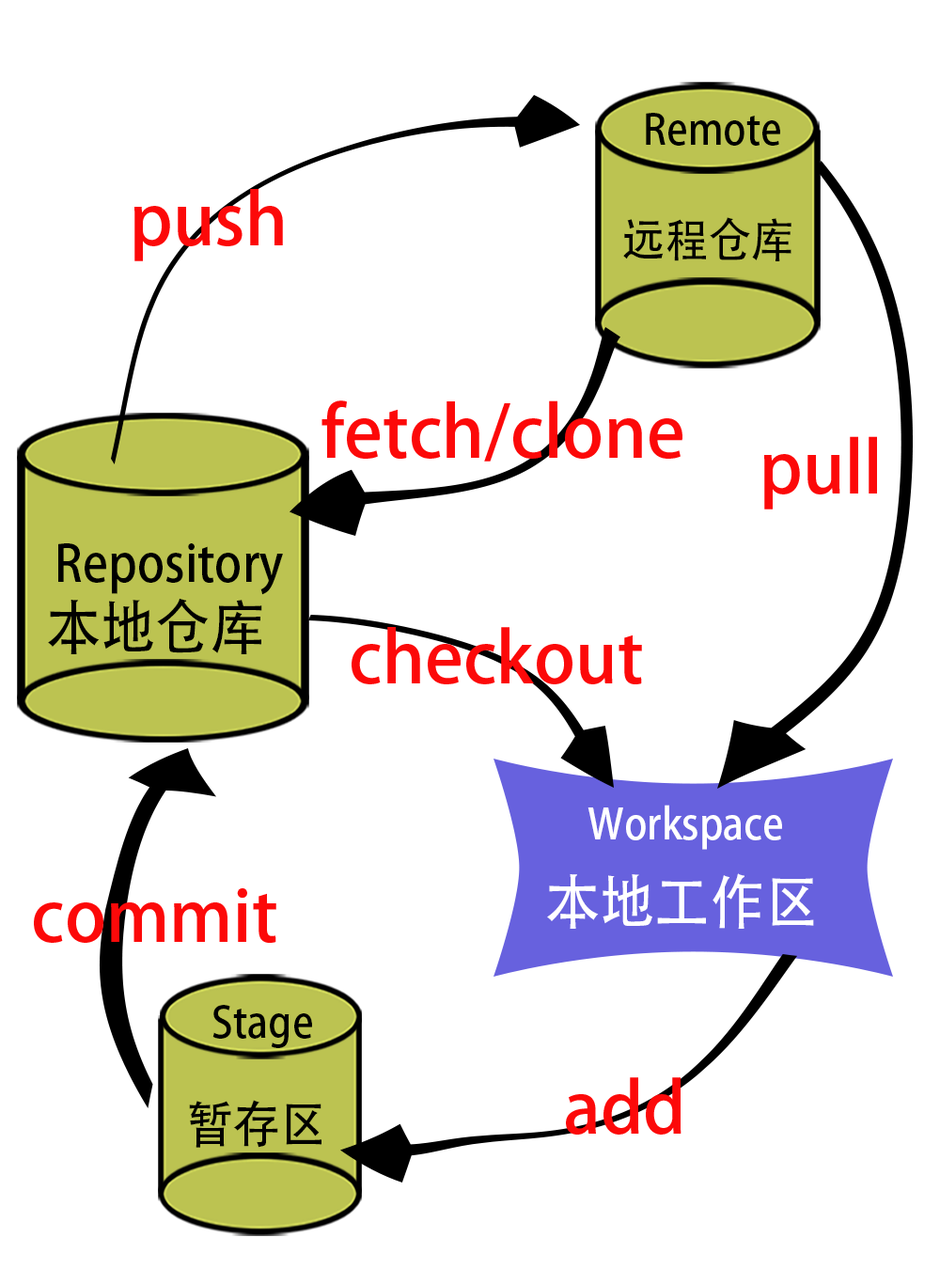
<style>
.page{position:relative;width:940px;height:1269px;background:#ffffff}
.page>*{position:absolute;margin:0}
.t1{font:42.3px "AdobeHeitiStd-Regular";color:#000000;scale:0.93 1}
.t2{font:70.5px "AdobeHeitiStd-Regular";color:#fc0909}
.t3{font:46.5px "AdobeHeitiStd-Regular";color:#000000;scale:0.93 1}
.t4{font:50.8px "AdobeHeitiStd-Regular";color:#000000;scale:0.93 1}
.t5{font:59.2px "AdobeHeitiStd-Regular";color:#000000;scale:0.93 1}
.t6{font:42.3px "AdobeHeitiStd-Regular";color:#ffffff;scale:0.93 1}
.t7{font:59.2px "AdobeHeitiStd-Regular";color:#ffffff;scale:0.93 1}
</style>
<div class="page">
<p class="t1" style="left:646px;top:113px;width:134px;height:33px">Remote</p>
<p class="t2" style="left:134px;top:189px;width:149px;height:72px">push</p>
<p class="t3" style="left:623px;top:217px;width:168px;height:44px">远程仓库</p>
<p class="t2" style="left:321px;top:400px;width:361px;height:61px">fetch/clone</p>
<p class="t2" style="left:764px;top:436px;width:113px;height:73px">pull</p>
<p class="t4" style="left:58px;top:543px;width:225px;height:52px">Repository</p>
<p class="t5" style="left:48px;top:598px;width:214px;height:56px">本地仓库</p>
<p class="t2" style="left:351px;top:627px;width:291px;height:57px">checkout</p>
<p class="t6" style="left:587px;top:804px;width:195px;height:46px">Workspace</p>
<p class="t7" style="left:547px;top:873px;width:267px;height:56px">本地工作区</p>
<p class="t2" style="left:34px;top:888px;width:242px;height:55px">commit</p>
<p class="t1" style="left:212px;top:1005px;width:100px;height:43px">Stage</p>
<p class="t2" style="left:566px;top:1077px;width:115px;height:57px">add</p>
<p class="t4" style="left:189px;top:1100px;width:132px;height:48px">暂存区</p>
</div>
